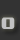
<style>
.page{position:relative;width:20px;height:40px;background:#333333}
.page>*{position:absolute;margin:0}
.t1{font:18px "Babylon5";color:#c2c2c2}
</style>
<div class="page">
<p class="t1" style="left:1px;top:17px;width:14px;height:12px">0</p>
</div>
